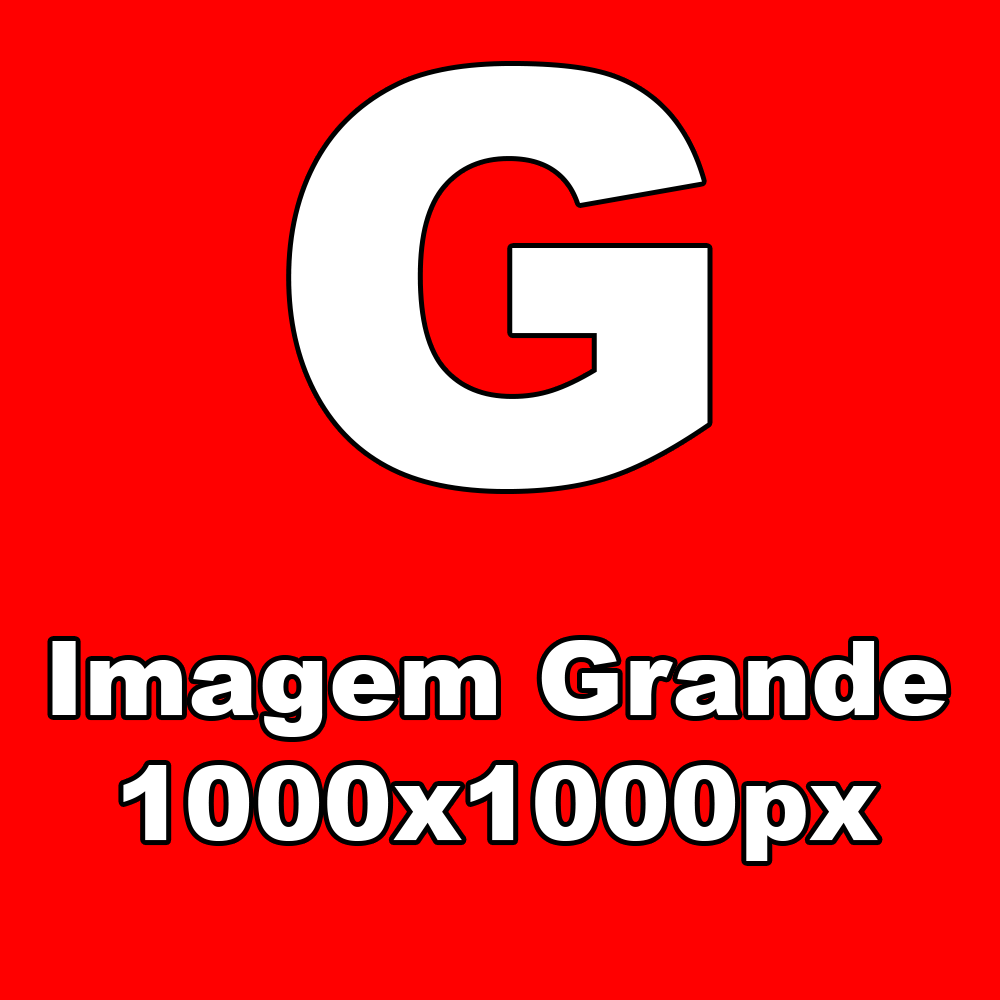
<style>
.page{position:relative;width:1000px;height:1000px;background:#ff0000}
.page>*{position:absolute;margin:0}
.t1{font:570.8px "Arial-Black";color:#ffffff}
.t2{font:104.2px "Arial-Black";color:#ffffff}
</style>
<div class="page">
<p class="t1" style="left:291px;top:66px;width:417px;height:423px">G</p>
<p class="t2" style="left:52px;top:640px;width:895px;height:221px;text-align:center">Imagem Grande<br>1000x1000px</p>
</div>
